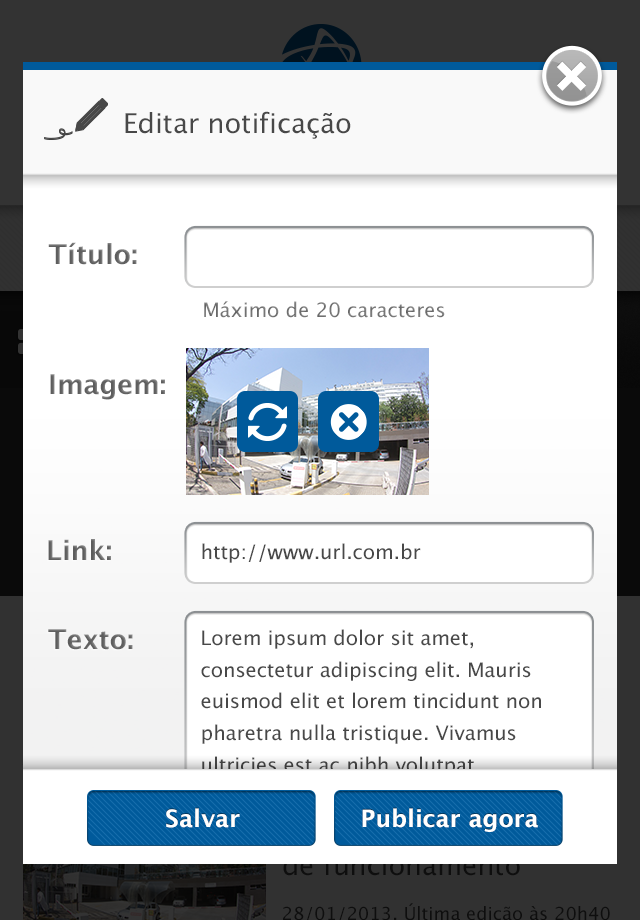
<style>
.page{position:relative;width:640px;height:920px;background:#ffffff}
.page>*{position:absolute;margin:0}
.t1{font:27.2px "LucidaGrande";color:#484848}
.t2{font:27.2px "LucidaGrande-Bold";color:#5d5d5d}
.t3{font:19.9px "LucidaGrande";color:#767676}
.t4{font:19.9px "LucidaGrande";color:#484848}
.t5{font:19.9px/31.7px "LucidaGrande";color:#484848}
.t6{font:24px "LucidaGrande-Bold";color:#ffffff}
</style>
<div class="page">
<p class="t1" style="left:125px;top:111px;width:226px;height:28px">Editar notificação</p>
<p class="t2" style="left:48px;top:242px;width:89px;height:23px">Título:</p>
<p class="t3" style="left:204px;top:301px;width:241px;height:17px">Máximo de 20 caracteres</p>
<p class="t2" style="left:50px;top:374px;width:115px;height:26px">Imagem:</p>
<p class="t2" style="left:48px;top:539px;width:63px;height:21px">Link:</p>
<p class="t4" style="left:202px;top:543px;width:219px;height:20px">http://www.url.com.br</p>
<p class="t2" style="left:48px;top:629px;width:85px;height:21px">Texto:</p>
<p class="t5" style="left:201px;top:629px;width:340px;height:147px">Lorem ipsum dolor sit amet, consectetur adipiscing elit. Mauris euismod elit et lorem tincidunt non pharetra nulla tristique. Vivamus ultricies est ac nibh volutpat.</p>
<p class="t6" style="left:166px;top:808px;width:74px;height:20px">Salvar</p>
<p class="t6" style="left:362px;top:808px;width:176px;height:24px">Publicar agora</p>
</div>
